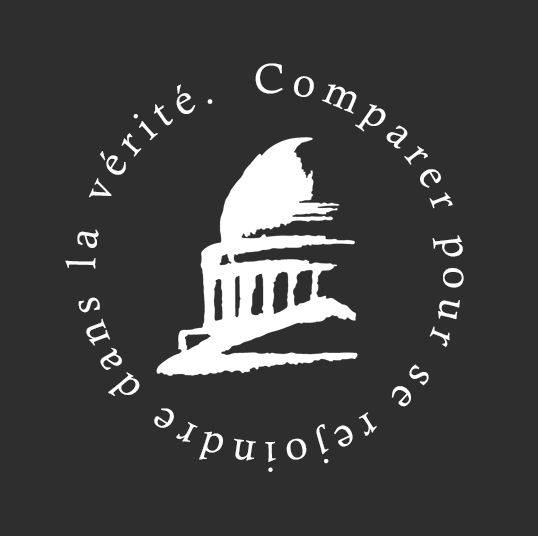
<style>
.page{position:relative;width:538px;height:536px;background:#2e2e2e}
.page>*{position:absolute;margin:0}
.t1{font:41.7px/58.3px "CalistoMT";letter-spacing:0.185em;color:#ffffff}
</style>
<div class="page">
<p class="t1" style="left:65px;top:63px;width:399px;height:409px">Comparer pour se rejoindre dans la vérité.</p>
</div>
